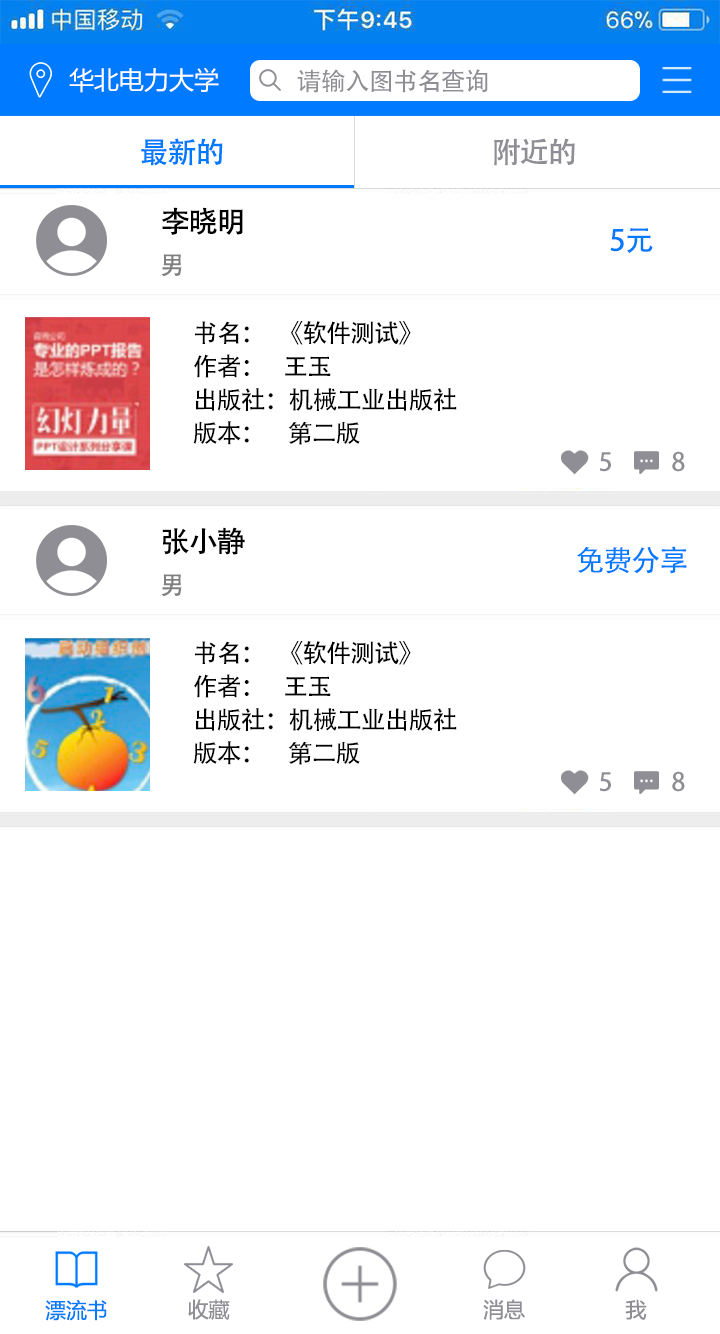
<style>
.page{position:relative;width:720px;height:1334px;background:#ffffff}
.page>*{position:absolute;margin:0}
.t1{font:25px "MicrosoftYaHei";color:#ffffff}
.t2{font:25px "AdobeHeitiStd-Regular";letter-spacing:-0.04em;color:#8f8e94}
.t3{font:29.2px "AdobeHeitiStd-Regular";letter-spacing:-0.04em;color:#007bff}
.t4{font:29.2px "AdobeHeitiStd-Regular";letter-spacing:-0.04em;color:#8f8e94}
.t5{font:29.2px "AdobeHeitiStd-Regular";letter-spacing:-0.04em;color:#000000}
.t6{font:25px "AdobeHeitiStd-Regular";letter-spacing:-0.04em;color:#808080}
.t7{font:25px/33.3px "AdobeHeitiStd-Regular";letter-spacing:-0.04em;color:#000000}
.t8{font:20.8px "MicrosoftYaHei";color:#007bff}
.t9{font:20.8px "MicrosoftYaHei";color:#8f8e94}
</style>
<div class="page">
<p class="t1" style="left:69px;top:67px;width:150px;height:26px">华北电力大学</p>
<p class="t2" style="left:297px;top:69px;width:191px;height:24px">请输入图书名查询</p>
<p class="t3" style="left:141px;top:138px;width:434px;height:28px">最新的                                                 <span class="t4"> 附近的</span></p>
<p class="t5" style="left:161px;top:207px;width:82px;height:28px">李晓明</p>
<p class="t3" style="left:610px;top:228px;width:43px;height:26px">5元</p>
<p class="t6" style="left:161px;top:254px;width:21px;height:23px">男</p>
<p class="t7" style="left:193px;top:321px;width:264px;height:124px">书名：   《软件测试》<br>作者：    王玉<br>出版社：机械工业出版社<br>版本：     第二版</p>
<p class="t2" style="left:599px;top:451px;width:86px;height:21px">5             8</p>
<p class="t5" style="left:162px;top:527px;width:83px;height:28px">张小静</p>
<p class="t3" style="left:577px;top:546px;width:110px;height:28px">免费分享</p>
<p class="t6" style="left:161px;top:574px;width:21px;height:23px">男</p>
<p class="t7" style="left:193px;top:641px;width:264px;height:124px">书名：   《软件测试》<br>作者：    王玉<br>出版社：机械工业出版社<br>版本：     第二版</p>
<p class="t2" style="left:599px;top:771px;width:86px;height:21px">5             8</p>
<p class="t8" style="left:45px;top:1299px;width:62px;height:22px">漂流书</p>
<p class="t9" style="left:188px;top:1299px;width:42px;height:21px">收藏</p>
<p class="t9" style="left:483px;top:1299px;width:42px;height:21px">消息</p>
<p class="t9" style="left:625px;top:1299px;width:22px;height:21px">我</p>
</div>
